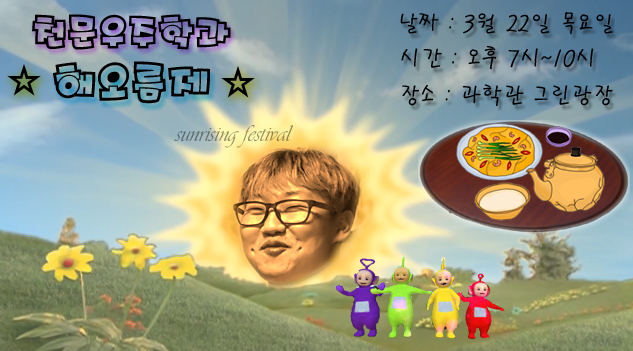
<style>
.page{position:relative;width:633px;height:351px}
.page>*{position:absolute;margin:0}
.t1{font:36px "KoreanPONMO-R";color:#000000}
.t2{font:24px "PyunjiR-HM";color:#000000}
.t3{font:42px "KoreanPONMO-R";color:#000000}
.t4{font:24px "Vivaldii"}
</style>
<div class="page">
<p class="t1" style="left:32px;top:14px;width:199px;height:36px">천문우주학과</p>
<p class="t2" style="left:400px;top:12px;width:213px;height:23px">날짜 : 3월 22일 목요일</p>
<p class="t2" style="left:401px;top:46px;width:193px;height:24px">시간 : 오후 7시~10시</p>
<p class="t3" style="left:7px;top:64px;width:34px;height:32px">☆</p>
<p class="t3" style="left:53px;top:61px;width:158px;height:43px">해오름제</p>
<p class="t3" style="left:221px;top:66px;width:34px;height:32px">☆</p>
<p class="t2" style="left:402px;top:84px;width:211px;height:22px">장소 : 과학관 그린광장</p>
<p class="t4" style="left:174px;top:125px;width:119px;height:23px">sunrising festival</p>
</div>
